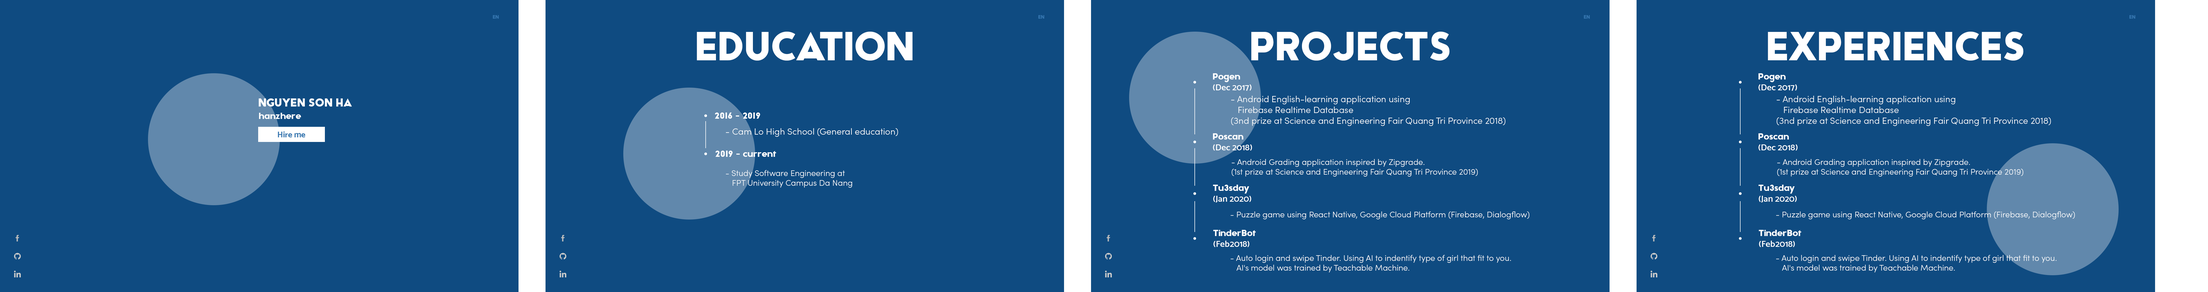
<style>
.page{position:relative;width:2208px;height:292px;background:#0f4b81}
.page>*{position:absolute;margin:0}
.t1{font:5px "Adca";color:#3475af}
.t2{font:41.4px "Adca";color:#ffffff}
.t3{font:9px "MoskSemi-Bold600";color:#ffffff}
.t4{font:9px "Adca";color:#ffffff}
.t5{font:12px "Adca";color:#ffffff}
.t6{font:9px "SofiaPro-Light";color:#ffffff}
.t7{font:8.3px "MoskBold700";color:#3475af}
.t8{font:8.3px "SofiaPro-Light";color:#ffffff}
</style>
<div class="page">
<p class="t1" style="left:493px;top:15px;width:6px;height:4px">EN</p>
<p class="t1" style="left:1038px;top:15px;width:6px;height:4px">EN</p>
<p class="t1" style="left:1584px;top:15px;width:5px;height:4px">EN</p>
<p class="t1" style="left:2129px;top:15px;width:6px;height:4px">EN</p>
<p class="t2" style="left:697px;top:32px;width:215px;height:28px">EDUCATION</p>
<p class="t2" style="left:1251px;top:32px;width:198px;height:28px">PROJECTS</p>
<p class="t2" style="left:1767px;top:32px;width:256px;height:28px">EXPERIENCES</p>
<p class="t3" style="left:1213px;top:73px;width:38px;height:18px"><span class="t4">Pogen <br></span>(Dec 2017)</p>
<p class="t3" style="left:1758px;top:73px;width:39px;height:18px"><span class="t4">Pogen <br></span>(Dec 2017)</p>
<p class="t5" style="left:259px;top:98px;width:93px;height:8px">NGUYEN SON HA</p>
<p class="t6" style="left:1231px;top:96px;width:274px;height:30px">- Android English-learning application using <br>   Firebase Realtime Database<br>(3nd prize at Science and Engineering Fair Quang Tri Province 2018)</p>
<p class="t6" style="left:1776px;top:96px;width:275px;height:30px">- Android English-learning application using <br>   Firebase Realtime Database<br>(3nd prize at Science and Engineering Fair Quang Tri Province 2018)</p>
<p class="t4" style="left:259px;top:113px;width:42px;height:6px">hanzhere</p>
<p class="t4" style="left:715px;top:112px;width:45px;height:7px">2016 - 2019</p>
<p class="t7" style="left:278px;top:131px;width:27px;height:6px">Hire me</p>
<p class="t6" style="left:726px;top:128px;width:172px;height:9px">- Cam Lo High School (General education)</p>
<p class="t3" style="left:1213px;top:133px;width:39px;height:17px"><span class="t4">Poscan<br></span>(Dec 2018)</p>
<p class="t3" style="left:1758px;top:133px;width:39px;height:17px"><span class="t4">Poscan<br></span>(Dec 2018)</p>
<p class="t4" style="left:715px;top:150px;width:61px;height:7px">2019 - current</p>
<p class="t8" style="left:1231px;top:159px;width:246px;height:18px">- Android Grading application inspired by Zipgrade.<br>(1st prize at Science and Engineering Fair Quang Tri Province 2019)</p>
<p class="t8" style="left:1777px;top:159px;width:246px;height:18px">- Android Grading application inspired by Zipgrade.<br>(1st prize at Science and Engineering Fair Quang Tri Province 2019)</p>
<p class="t8" style="left:726px;top:170px;width:126px;height:18px">- Study Software Engineering at<br>   FPT University Campus Da Nang</p>
<p class="t3" style="left:1213px;top:184px;width:38px;height:18px"><span class="t4">Tu3sday<br></span>(Jan 2020)</p>
<p class="t3" style="left:1758px;top:184px;width:38px;height:18px"><span class="t4">Tu3sday<br></span>(Jan 2020)</p>
<p class="t8" style="left:1230px;top:211px;width:299px;height:8px">- Puzzle game using React Native, Google Cloud Platform (Firebase, Dialogflow)</p>
<p class="t8" style="left:1776px;top:211px;width:298px;height:8px">- Puzzle game using React Native, Google Cloud Platform (Firebase, Dialogflow)</p>
<p class="t4" style="left:1213px;top:230px;width:43px;height:17px">TinderBot<br><span class="t3">(Feb2018)</span></p>
<p class="t4" style="left:1758px;top:230px;width:43px;height:17px">TinderBot<br><span class="t3">(Feb2018)</span></p>
<p class="t8" style="left:1230px;top:255px;width:281px;height:17px">- Auto login and swipe Tinder. Using AI to indentify type of girl that fit to you.<br>   AI's model was trained by Teachable Machine.</p>
<p class="t8" style="left:1776px;top:255px;width:280px;height:17px">- Auto login and swipe Tinder. Using AI to indentify type of girl that fit to you.<br>   AI's model was trained by Teachable Machine.</p>
</div>
